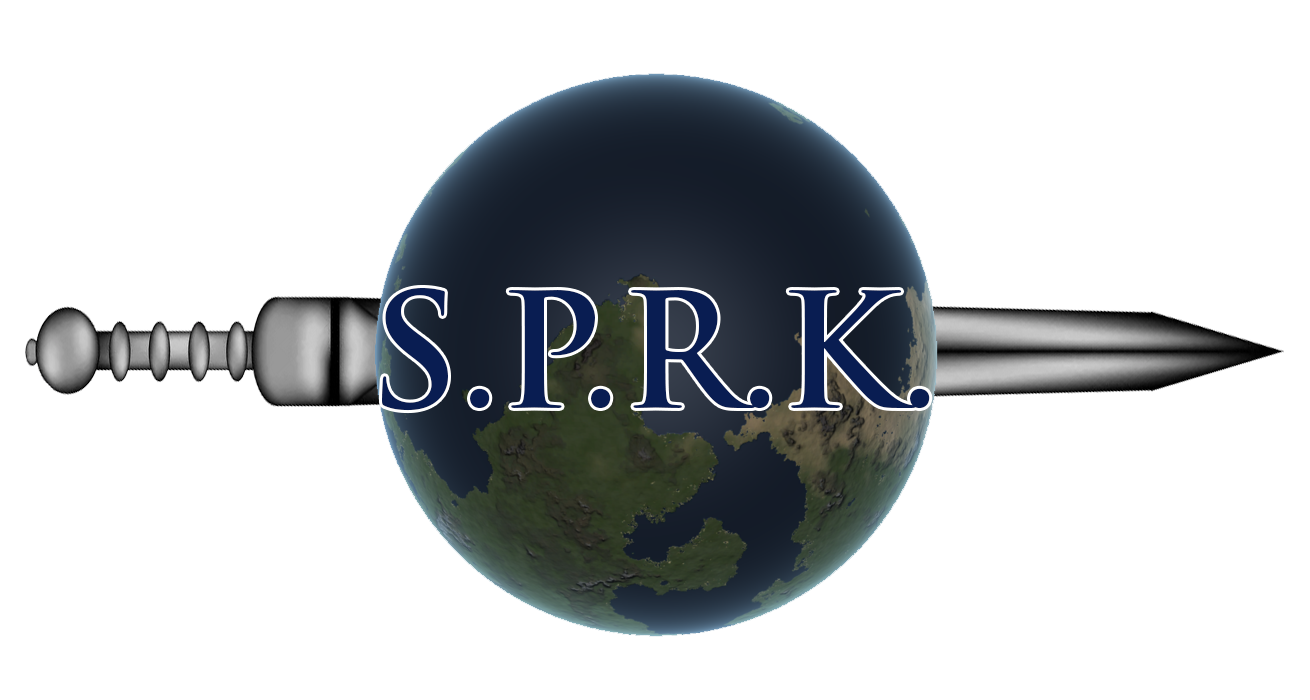
<style>
.page{position:relative;width:1310px;height:700px;background:#ffffff}
.page>*{position:absolute;margin:0}
.t1{font:157px "TrajanPro-Bold";color:#091d52}
</style>
<div class="page">
<p class="t1" style="left:382px;top:288px;width:548px;height:123px">S.P.R.K.</p>
</div>
